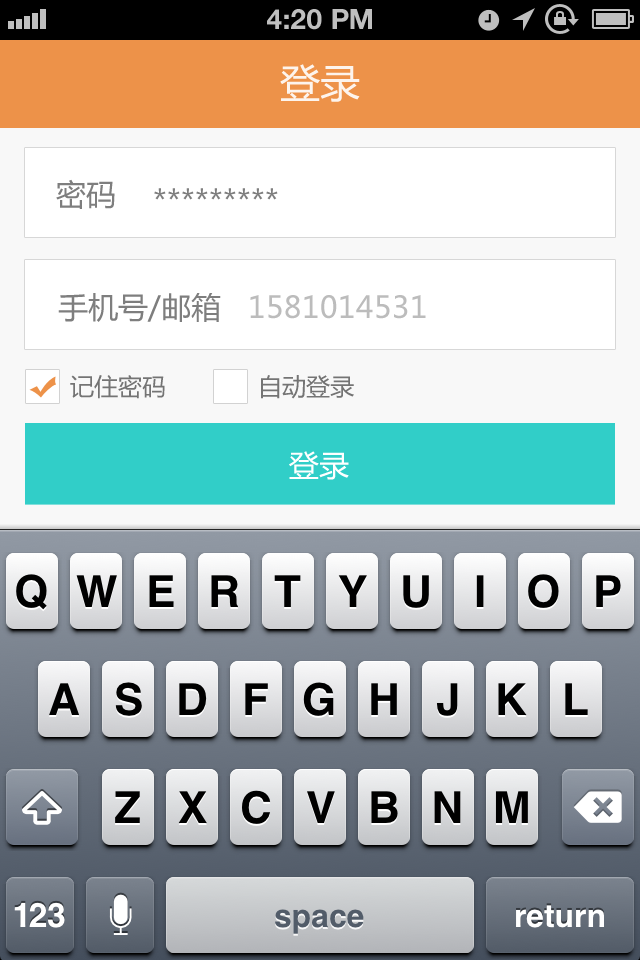
<style>
.page{position:relative;width:640px;height:960px}
.page>*{position:absolute;margin:0}
.t1{font:28px "HelveticaNeue-Bold";color:#bfbfbf;text-transform:uppercase}
.t2{font:40px "MicrosoftYaHei";color:#ffffff}
.t3{font:30px "MicrosoftYaHei";color:#7e7e7e}
.t4{font:30px "MicrosoftYaHei";color:#bcbcbc}
.t5{font:24px "MicrosoftYaHei";color:#747474}
.t6{font:30px "MicrosoftYaHei";color:#ffffff}
</style>
<div class="page">
<p class="t1" style="left:267px;top:9px;width:105px;height:21px">4:20 PM</p>
<p class="t2" style="left:280px;top:64px;width:80px;height:38px;opacity:0.9">登录</p>
<p class="t3" style="left:56px;top:179px;width:59px;height:30px">密码</p>
<p class="t3" style="left:154px;top:188px;width:124px;height:12px">*********</p>
<p class="t4" style="left:58px;top:293px;width:368px;height:29px"><span class="t3">手机号/邮箱   </span>1581014531</p>
<p class="t5" style="left:70px;top:375px;width:95px;height:24px">记住密码</p>
<p class="t5" style="left:261px;top:375px;width:93px;height:24px">自动登录</p>
<p class="t6" style="left:289px;top:451px;width:60px;height:29px">登录</p>
</div>
